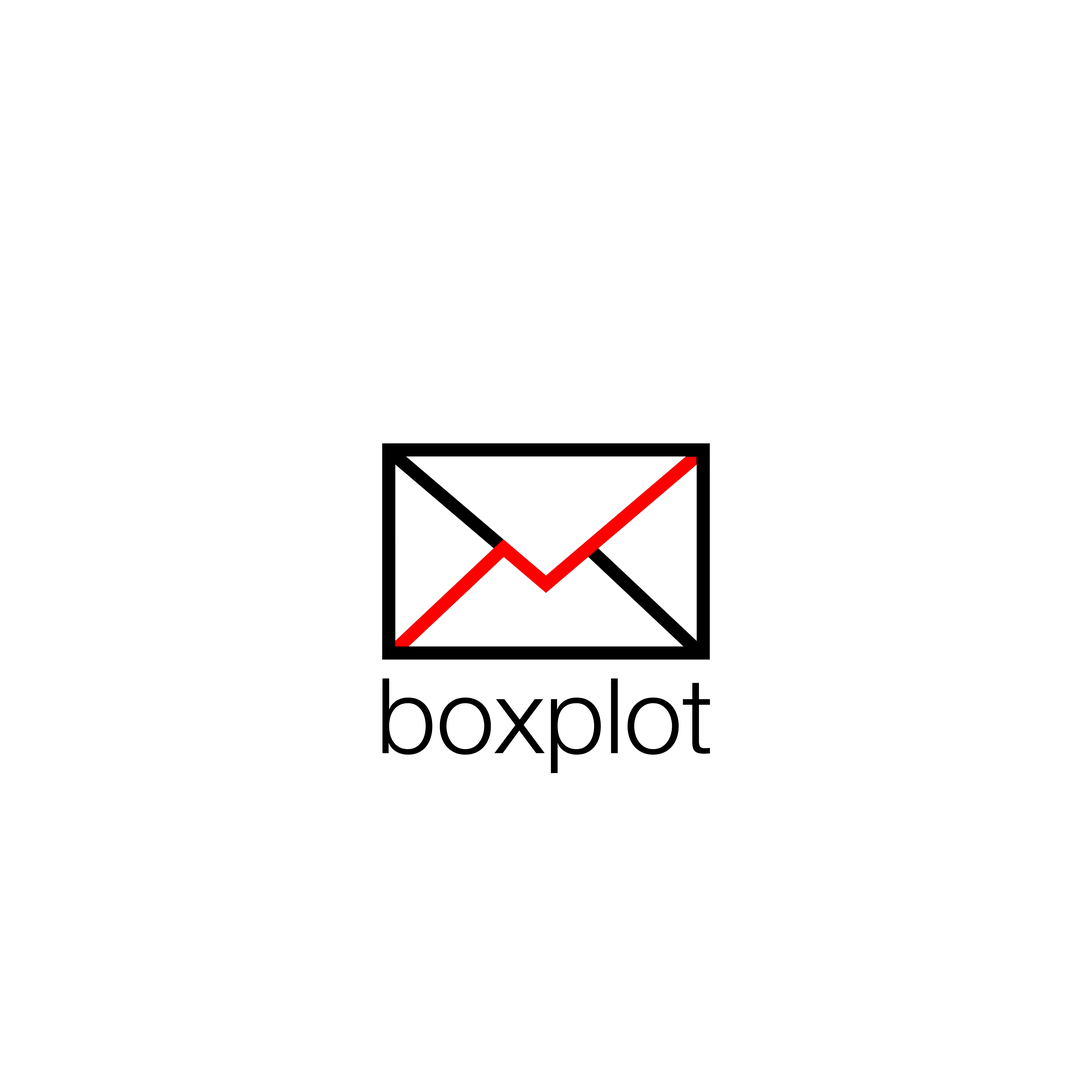
<style>
.page{position:relative;width:1092px;height:1092px;background:#ffffff}
.page>*{position:absolute;margin:0}
.t1{font:104.6px "HelveticaNeue-Light";color:#000000}
</style>
<div class="page">
<p class="t1" style="left:382px;top:678px;width:328px;height:95px">boxplot</p>
</div>
